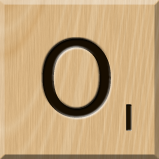
<style>
.page{position:relative;width:159px;height:159px}
.page>*{position:absolute;margin:0}
.t1{font:116px "MS-UIGothic";color:#180e01}
.t2{font:36px "GillSansMT";color:#1c1101;font-weight:bold;scale:1.1 1}
</style>
<div class="page">
<p class="t1" style="left:42px;top:38px;width:69px;height:80px">O</p>
<p class="t2" style="left:126px;top:104px;width:6px;height:27px">1</p>
</div>
